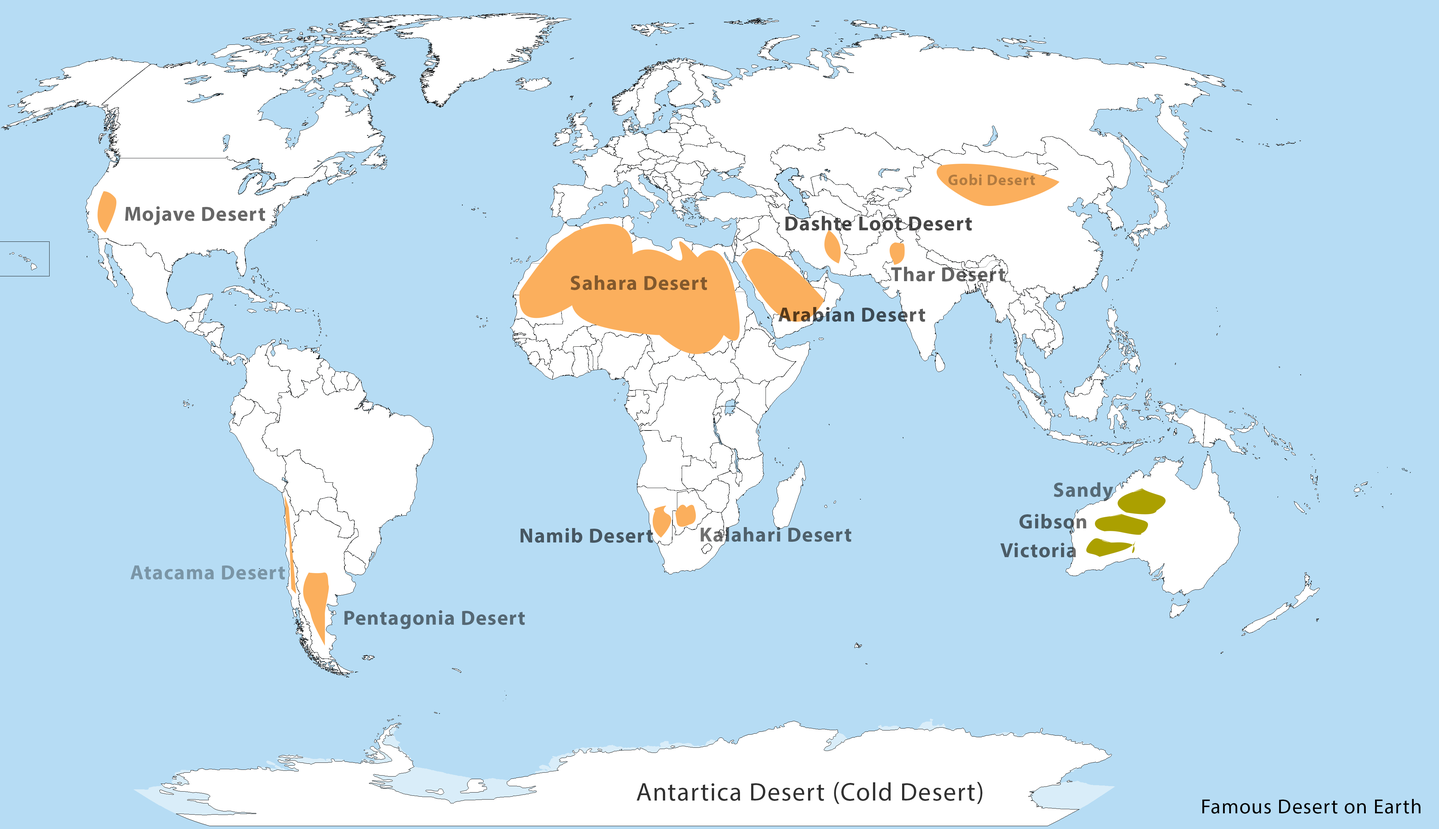
<style>
.page{position:relative;width:1439px;height:829px;background:#b6dcf4}
.page>*{position:absolute;margin:0}
.t1{font:15.3px "MyriadHebrew-Bold";letter-spacing:0.04em;color:#b27b40}
.t2{font:20.5px "MyriadHebrew-Bold";letter-spacing:0.04em;color:#676767}
.t3{font:20.5px "MyriadHebrew-Bold";letter-spacing:0.04em;color:#474747}
.t4{font:20.5px "MyriadHebrew-Bold";letter-spacing:0.04em;color:#636363}
.t5{font:20.5px "MyriadHebrew-Bold";letter-spacing:0.04em;color:#83592d}
.t6{font:20.5px "MyriadHebrew-Bold";letter-spacing:0.04em}
.t7{font:20.5px "MyriadHebrew-Bold";letter-spacing:0.04em;color:#566a76}
.t8{font:20.5px "MyriadHebrew-Bold";letter-spacing:0.04em;color:#4b5c67}
.t9{font:20.5px "MyriadHebrew-Bold";letter-spacing:0.04em;color:#475762}
.t10{font:20.5px "MyriadHebrew-Bold";letter-spacing:0.04em;color:#4f616c}
.t11{font:20.5px "MyriadHebrew-Bold";letter-spacing:0.04em;color:#7a95a6}
.t12{font:20.5px "MyriadHebrew-Bold";letter-spacing:0.04em;color:#556874}
.t13{font:25.6px "MyriadHebrew-Regular";letter-spacing:0.04em;color:#313131}
.t14{font:20.5px "MyriadHebrew-Regular";letter-spacing:0.04em;color:#000000}
</style>
<div class="page">
<p class="t1" style="left:948px;top:174px;width:87px;height:11px">Gobi Desert</p>
<p class="t2" style="left:125px;top:206px;width:140px;height:19px">Mojave Desert</p>
<p class="t3" style="left:785px;top:216px;width:187px;height:15px">Dashte Loot Desert</p>
<p class="t4" style="left:891px;top:267px;width:114px;height:14px">Thar Desert</p>
<p class="t5" style="left:570px;top:275px;width:137px;height:15px">Sahara Desert</p>
<p class="t6" style="left:778px;top:307px;width:147px;height:15px">Arabian Desert</p>
<p class="t7" style="left:1054px;top:482px;width:59px;height:19px">Sandy</p>
<p class="t8" style="left:1019px;top:514px;width:67px;height:15px">Gibson</p>
<p class="t9" style="left:521px;top:528px;width:132px;height:15px">Namib Desert</p>
<p class="t10" style="left:701px;top:527px;width:150px;height:15px">Kalahari Desert</p>
<p class="t8" style="left:1000px;top:543px;width:76px;height:14px">Victoria</p>
<p class="t11" style="left:130px;top:565px;width:155px;height:14px">Atacama Desert</p>
<p class="t12" style="left:344px;top:610px;width:181px;height:19px">Pentagonia Desert</p>
<p class="t13" style="left:637px;top:782px;width:345px;height:22px">Antartica Desert (Cold Desert)</p>
<p class="t14" style="left:1202px;top:799px;width:218px;height:14px">Famous Desert on Earth</p>
</div>
